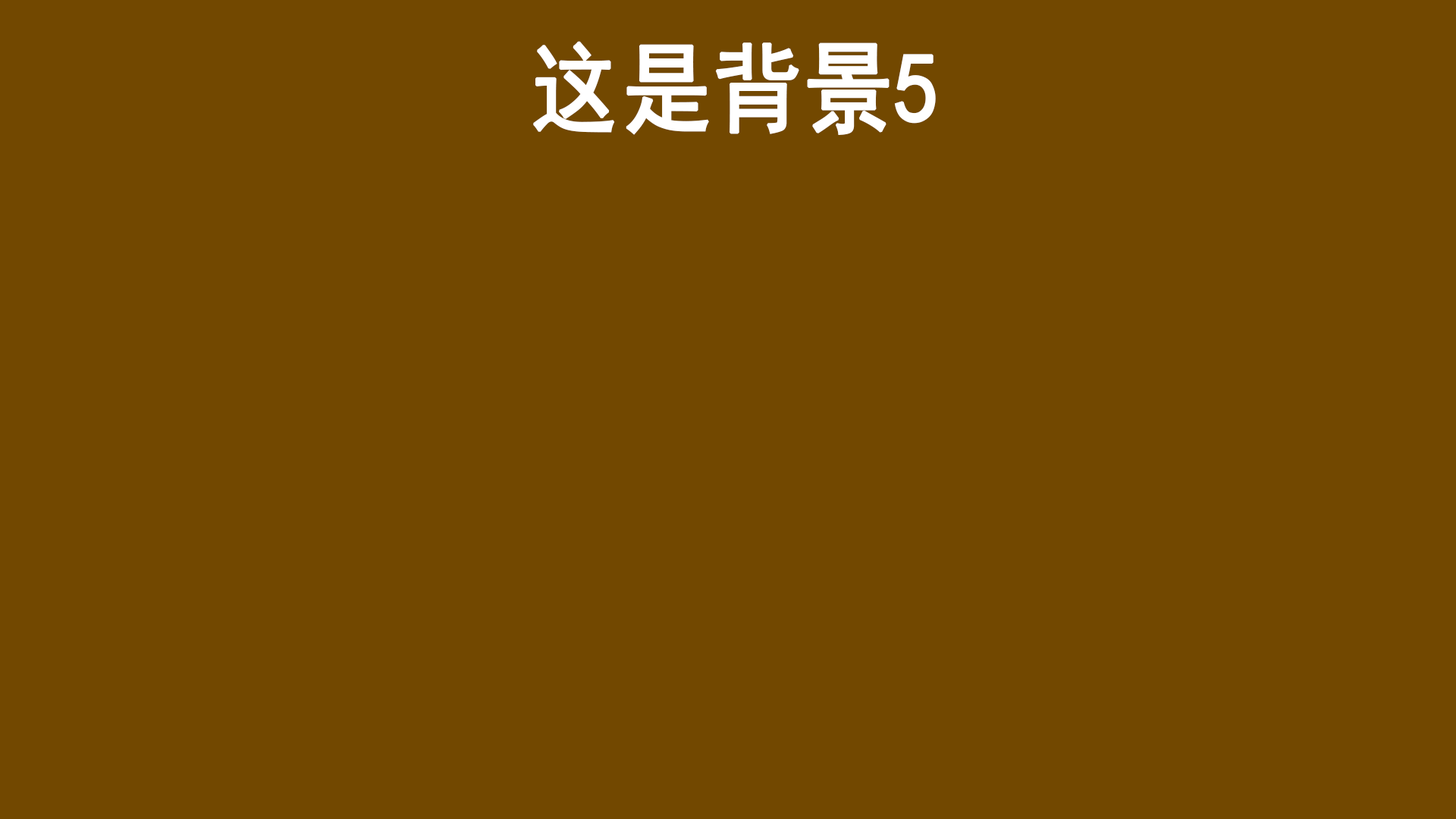
<style>
.page{position:relative;width:1456px;height:819px;background:#724800}
.page>*{position:absolute;margin:0}
.t1{font:98.6px "SimHei";color:#ffffff;font-weight:bold;scale:0.9 1}
</style>
<div class="page">
<p class="t1" style="left:533px;top:41px;width:403px;height:94px">这是背景5</p>
</div>
